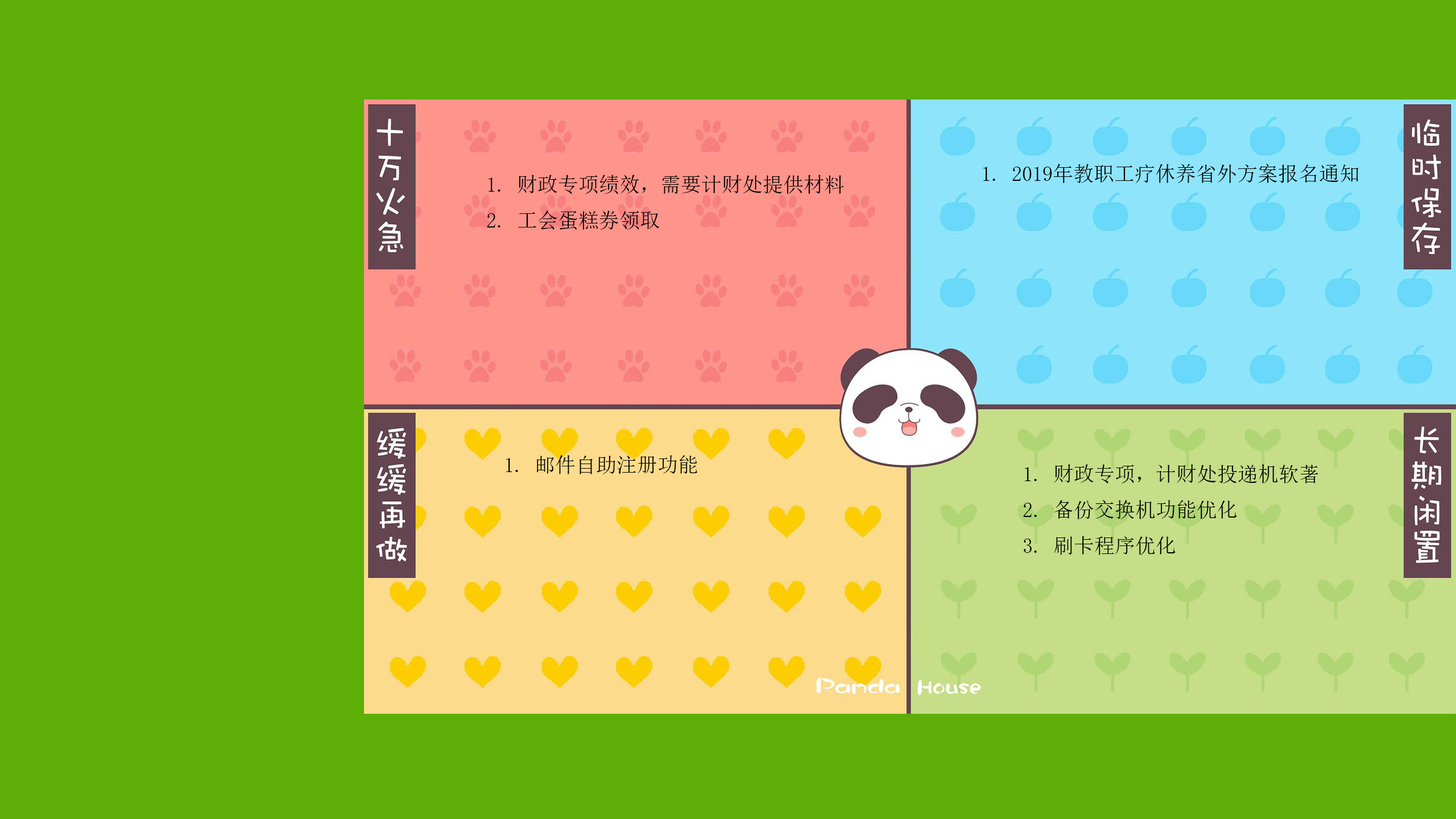
<style>
.page{position:relative;width:1456px;height:819px;background:#5eae08}
.page>*{position:absolute;margin:0}
.t1{font:20.5px "SimSun";color:#000000}
.t2{font:20.5px "SimSun";color:#010000}
</style>
<div class="page">
<p class="t1" style="left:983px;top:164px;width:376px;height:19px">1. 2019年教职工疗休养省外方案报名通知</p>
<p class="t2" style="left:487px;top:175px;width:357px;height:55px">1. 财政专项绩效，需要计财处提供材料<br>2. 工会蛋糕券领取</p>
<p class="t1" style="left:506px;top:455px;width:191px;height:19px">1. 邮件自助注册功能</p>
<p class="t1" style="left:1023px;top:464px;width:295px;height:91px">1. 财政专项，计财处投递机软著<br>2. 备份交换机功能优化<br>3. 刷卡程序优化</p>
</div>
